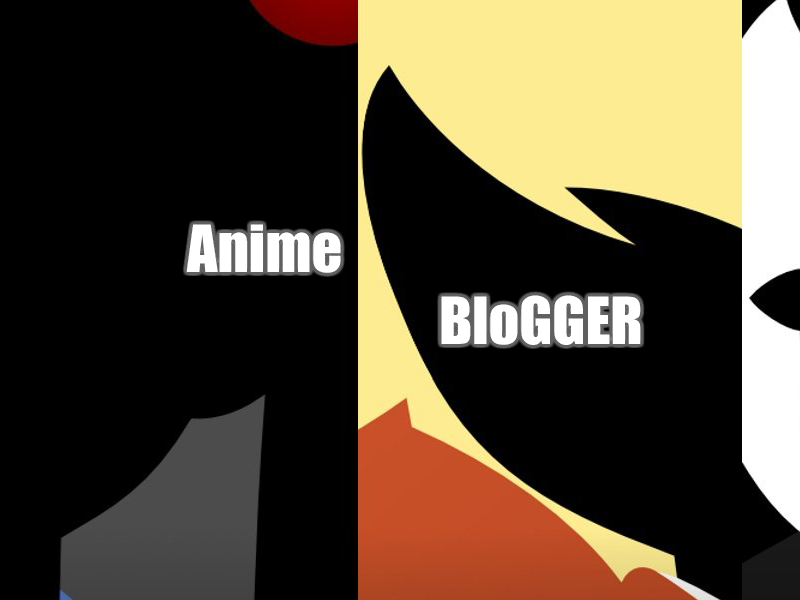
<style>
.page{position:relative;width:800px;height:600px;background:#000000}
.page>*{position:absolute;margin:0}
.t1{font:60px "Impact";color:#ffffff}
</style>
<div class="page">
<p class="t1" style="left:186px;top:224px;width:455px;height:121px">Anime<br>       BloGGER</p>
</div>
